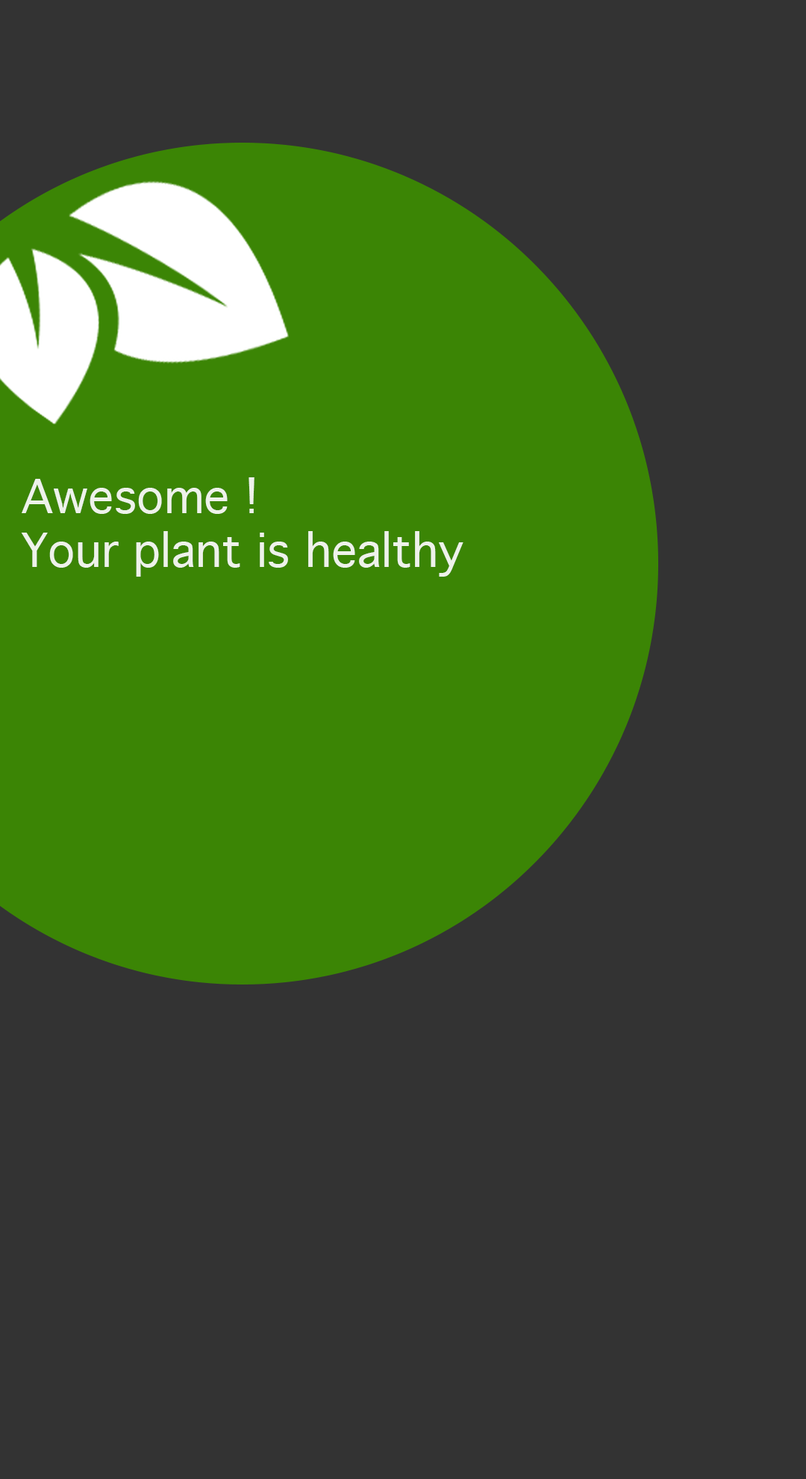
<style>
.page{position:relative;width:806px;height:1479px;background:#333333}
.page>*{position:absolute;margin:0}
.t1{font:44.8px "Geneva";color:#eef2ea}
</style>
<div class="page">
<p class="t1" style="left:21px;top:477px;width:443px;height:99px">Awesome !<br>Your plant is healthy</p>
</div>
